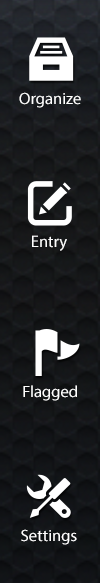
<style>
.page{position:relative;width:100px;height:583px}
.page>*{position:absolute;margin:0}
.t1{font:16.3px "MyriadPro-Regular";color:#ffffff}
.t2{font:16.8px "MyriadPro-Regular";color:#fefefe}
.t3{font:16.4px "MyriadPro-Regular";color:#ffffff}
</style>
<div class="page">
<p class="t1" style="left:19px;top:92px;width:62px;height:16px">Organize</p>
<p class="t2" style="left:32px;top:235px;width:35px;height:16px">Entry</p>
<p class="t3" style="left:23px;top:385px;width:54px;height:16px">Flagged</p>
<p class="t1" style="left:21px;top:529px;width:56px;height:16px">Settings</p>
</div>
